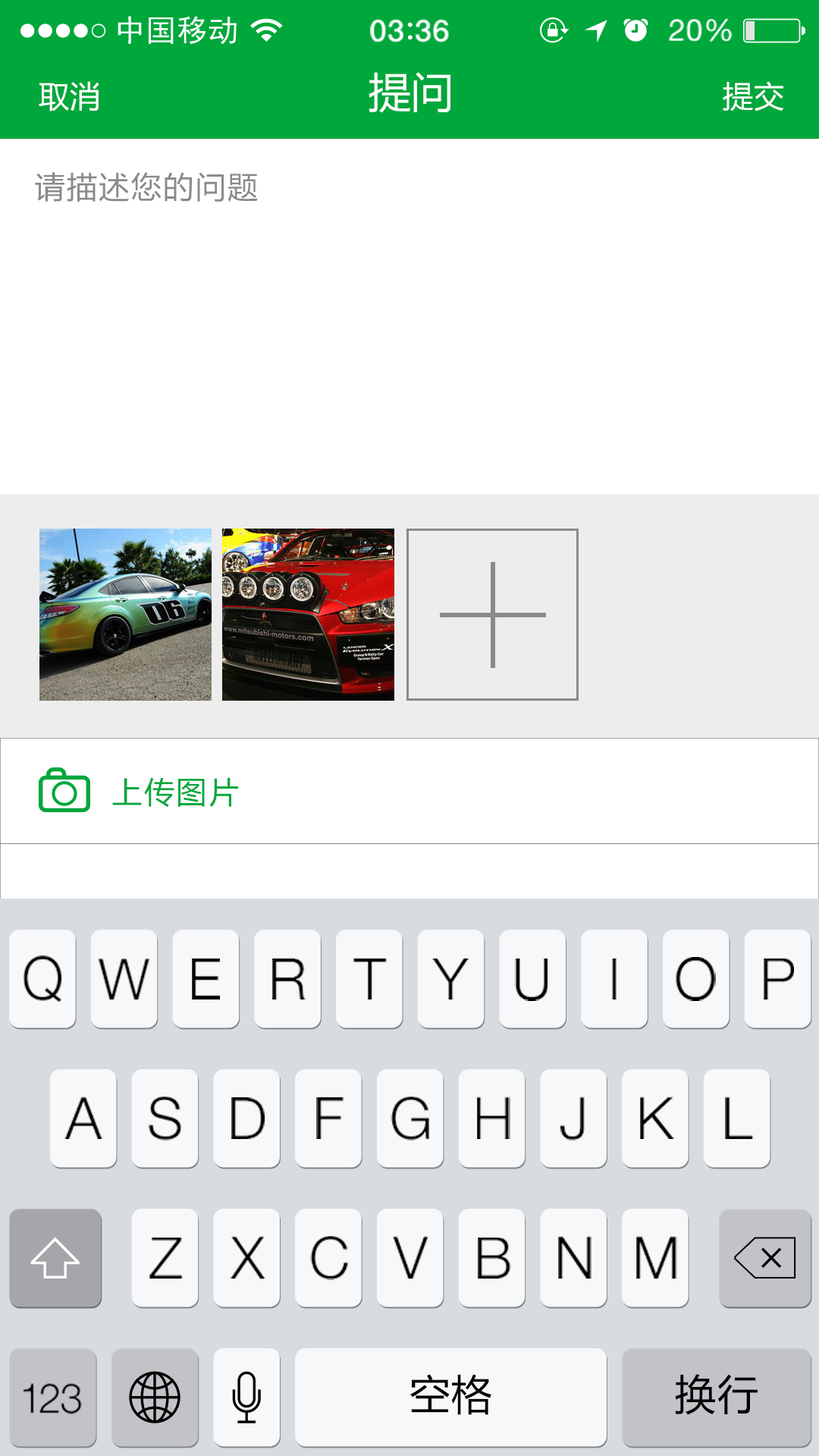
<style>
.page{position:relative;width:819px;height:1456px;background:#ffffff}
.page>*{position:absolute;margin:0}
.t1{font:41.7px "MicrosoftYaHei";letter-spacing:0.02em;color:#ffffff}
.t2{font:30.3px "MicrosoftYaHei";letter-spacing:0.02em;color:#ffffff}
.t3{font:30.3px "MicrosoftYaHei";letter-spacing:0.06em;color:#8a8a8a}
.t4{font:30.3px "MicrosoftYaHei";letter-spacing:0.06em;color:#00a73b}
.t5{font:59.7px "HelveticaNeue-Light";color:#000000;scale:0.94 1}
.t6{font:56.8px "HelveticaNeue-Light";color:#000000}
.t7{font:58.1px "HelveticaNeue-Light";color:#000000}
.t8{font:41.3px "HelveticaNeue-Light";color:#000000}
.t9{font:41.3px "MicrosoftYaHei";letter-spacing:0.01em;color:#000000}
</style>
<div class="page">
<p class="t1" style="left:369px;top:72px;width:81px;height:41px">提问</p>
<p class="t2" style="left:39px;top:81px;width:60px;height:30px">取消</p>
<p class="t2" style="left:723px;top:81px;width:61px;height:30px">提交</p>
<p class="t3" style="left:35px;top:172px;width:223px;height:30px">请描述您的问题</p>
<p class="t4" style="left:112px;top:777px;width:126px;height:31px">上传图片</p>
<p class="t5" style="left:24px;top:955px;width:37px;height:47px">Q</p>
<p class="t6" style="left:99px;top:959px;width:50px;height:40px">W</p>
<p class="t6" style="left:192px;top:959px;width:28px;height:40px">E</p>
<p class="t7" style="left:272px;top:959px;width:34px;height:40px">R</p>
<p class="t7" style="left:353px;top:959px;width:34px;height:40px">T</p>
<p class="t7" style="left:431px;top:959px;width:38px;height:40px">Y</p>
<p class="t7" style="left:514px;top:959px;width:34px;height:42px">U</p>
<p class="t7" style="left:612px;top:959px;width:5px;height:40px">I</p>
<p class="t7" style="left:676px;top:957px;width:40px;height:44px">O</p>
<p class="t7" style="left:764px;top:959px;width:30px;height:40px">P</p>
<p class="t7" style="left:64px;top:1097px;width:38px;height:42px">A</p>
<p class="t7" style="left:148px;top:1097px;width:33px;height:44px">S</p>
<p class="t7" style="left:231px;top:1097px;width:34px;height:42px">D</p>
<p class="t7" style="left:316px;top:1097px;width:28px;height:42px">F</p>
<p class="t7" style="left:391px;top:1097px;width:38px;height:44px">G</p>
<p class="t7" style="left:477px;top:1097px;width:33px;height:42px">H</p>
<p class="t7" style="left:560px;top:1097px;width:25px;height:44px">J</p>
<p class="t7" style="left:640px;top:1097px;width:34px;height:42px">K</p>
<p class="t7" style="left:725px;top:1097px;width:28px;height:42px">L</p>
<p class="t7" style="left:149px;top:1238px;width:34px;height:41px">Z</p>
<p class="t7" style="left:230px;top:1236px;width:36px;height:43px">X</p>
<p class="t7" style="left:310px;top:1236px;width:39px;height:44px">C</p>
<p class="t7" style="left:392px;top:1236px;width:36px;height:43px">V</p>
<p class="t7" style="left:478px;top:1238px;width:33px;height:41px">B</p>
<p class="t7" style="left:558px;top:1236px;width:33px;height:43px">N</p>
<p class="t7" style="left:636px;top:1236px;width:41px;height:43px">M</p>
<p class="t8" style="left:24px;top:1383px;width:58px;height:31px">123</p>
<p class="t9" style="left:409px;top:1374px;width:82px;height:41px">空格</p>
<p class="t9" style="left:675px;top:1374px;width:83px;height:41px">换行</p>
</div>
